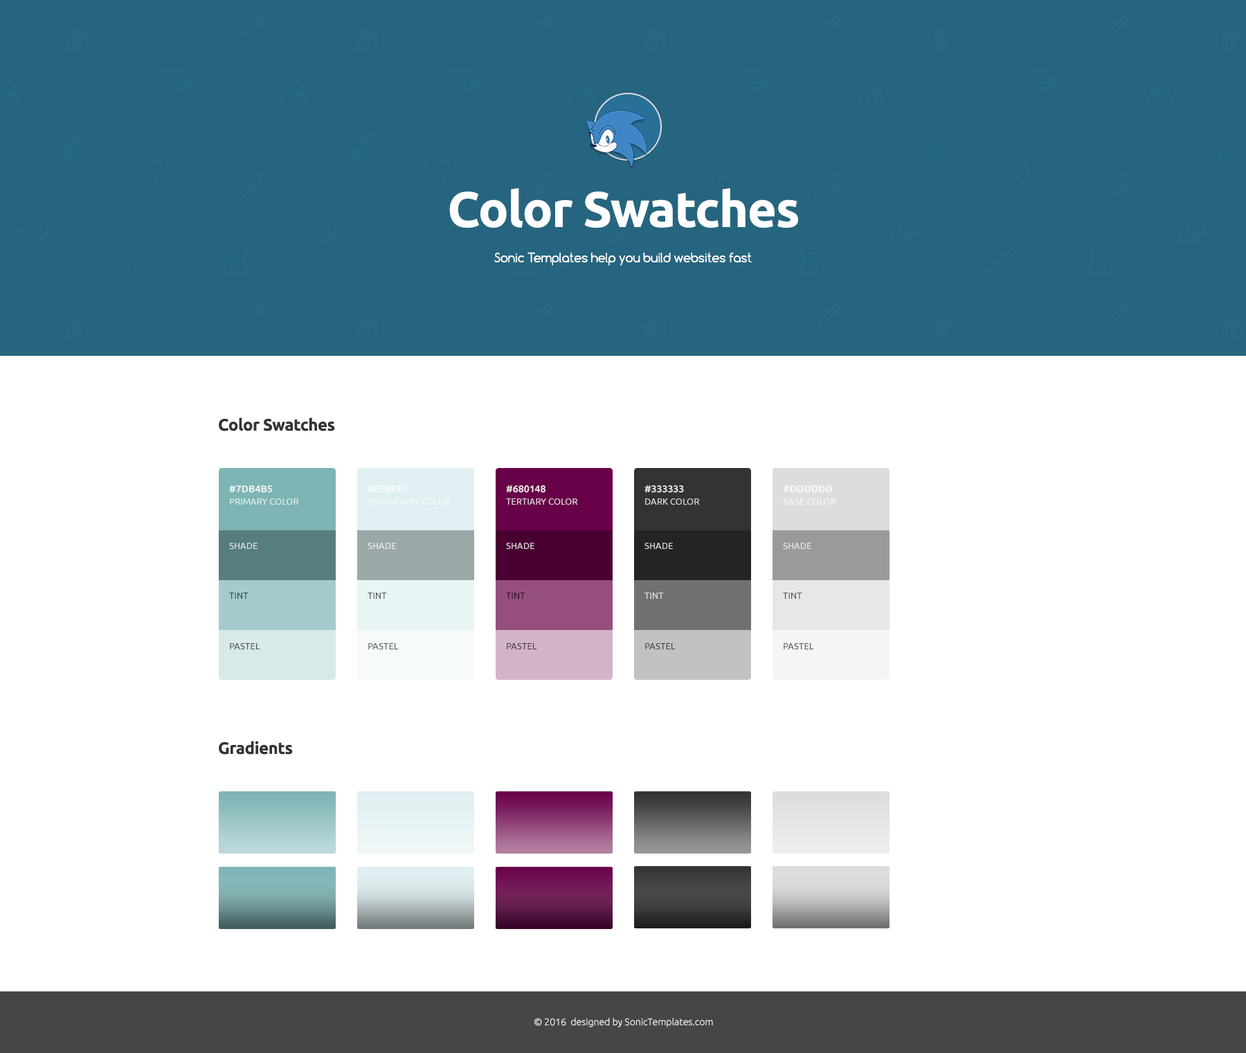
<style>
.page{position:relative;width:1246px;height:1053px;background:#ffffff}
.page>*{position:absolute;margin:0}
.t1{font:49.8px "Ubuntu-Bold";letter-spacing:-0.02em;color:#ffffff}
.t2{font:12.5px "Comfortaa-Regular";letter-spacing:-0.02em;color:#ffffff}
.t3{font:16.6px "Ubuntu-Bold";letter-spacing:-0.02em;color:#333333}
.t4{font:9px/12.5px "Ubuntu";color:#ffffff;text-transform:uppercase}
.t5{font:9.7px/12.5px "Ubuntu-Bold";color:#ffffff;text-transform:uppercase}
.t6{font:9px/12.5px "Ubuntu";color:#e6dde2;text-transform:uppercase}
.t7{font:9.7px/12.5px "Ubuntu-Bold";color:#e6dde2;text-transform:uppercase}
.t8{font:9px/12.5px "Ubuntu";color:#e0e0e0;text-transform:uppercase}
.t9{font:9.7px/12.5px "Ubuntu-Bold";color:#e0e0e0;text-transform:uppercase}
.t10{font:9px "Ubuntu";color:#e4e9e9;text-transform:uppercase}
.t11{font:9px "Ubuntu";color:#ffffff;text-transform:uppercase}
.t12{font:9px "Ubuntu";color:#e3dde0;text-transform:uppercase}
.t13{font:9px "Ubuntu";color:#dfdfdf;text-transform:uppercase}
.t14{font:9px "Ubuntu";color:#354444;text-transform:uppercase}
.t15{font:9px "Ubuntu";color:#4f5454;text-transform:uppercase}
.t16{font:9px "Ubuntu";color:#301527;text-transform:uppercase}
.t17{font:9px "Ubuntu";color:#4f4f4f;text-transform:uppercase}
.t18{font:9px "Ubuntu";color:#494f4f;text-transform:uppercase}
.t19{font:9px "Ubuntu";color:#545656;text-transform:uppercase}
.t20{font:9px "Ubuntu";color:#473b43;text-transform:uppercase}
.t21{font:9px "Ubuntu";color:#414141;text-transform:uppercase}
.t22{font:9px "Ubuntu";color:#545454;text-transform:uppercase}
.t23{font:9.7px "Ubuntu-Light";color:#ffffff}
</style>
<div class="page">
<p class="t1" style="left:449px;top:188px;width:349px;height:40px">Color Swatches</p>
<p class="t2" style="left:494px;top:252px;width:258px;height:14px">Sonic Templates help you build websites fast</p>
<p class="t3" style="left:219px;top:417px;width:116px;height:14px">Color Swatches</p>
<p class="t4" style="left:229px;top:485px;width:70px;height:20px;opacity:0.8"><span class="t5">#7DB4B5<br></span>Primary Color</p>
<p class="t4" style="left:368px;top:485px;width:83px;height:20px;opacity:0.8"><span class="t5">#E0EFF1<br></span>Secondary Color</p>
<p class="t6" style="left:506px;top:485px;width:72px;height:20px"><span class="t7">#680148<br></span>Tertiary Color</p>
<p class="t8" style="left:645px;top:485px;width:55px;height:20px"><span class="t9">#333333<br></span>Dark Color</p>
<p class="t4" style="left:783px;top:485px;width:53px;height:20px;opacity:0.8"><span class="t5">#dddddd<br></span>Base Color</p>
<p class="t10" style="left:229px;top:543px;width:29px;height:6px">Shade</p>
<p class="t11" style="left:368px;top:543px;width:28px;height:6px;opacity:0.8">Shade</p>
<p class="t12" style="left:506px;top:543px;width:28px;height:6px">Shade</p>
<p class="t13" style="left:645px;top:543px;width:28px;height:6px">Shade</p>
<p class="t11" style="left:783px;top:543px;width:28px;height:6px;opacity:0.8">Shade</p>
<p class="t14" style="left:229px;top:593px;width:20px;height:6px">Tint</p>
<p class="t15" style="left:368px;top:593px;width:19px;height:6px">Tint</p>
<p class="t16" style="left:506px;top:593px;width:19px;height:6px">Tint</p>
<p class="t11" style="left:645px;top:593px;width:19px;height:6px;opacity:0.8">Tint</p>
<p class="t17" style="left:783px;top:593px;width:19px;height:6px">Tint</p>
<p class="t18" style="left:230px;top:643px;width:30px;height:6px">Pastel</p>
<p class="t19" style="left:368px;top:643px;width:31px;height:6px">Pastel</p>
<p class="t20" style="left:507px;top:643px;width:30px;height:6px">Pastel</p>
<p class="t21" style="left:645px;top:643px;width:31px;height:6px">Pastel</p>
<p class="t22" style="left:784px;top:643px;width:30px;height:6px">Pastel</p>
<p class="t3" style="left:219px;top:741px;width:74px;height:14px">Gradients</p>
<p class="t23" style="left:534px;top:1018px;width:179px;height:9px">© 2016  designed by SonicTemplates.com</p>
</div>
